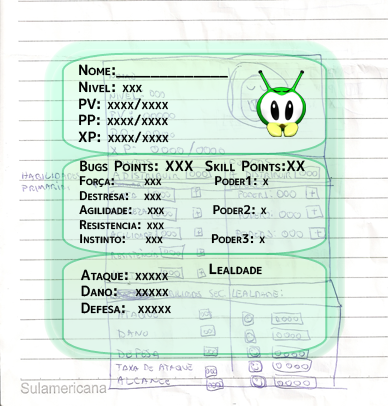
<style>
.page{position:relative;width:388px;height:406px;background:#ffffff}
.page>*{position:absolute;margin:0}
.t1{font:14px "mplus-1p-bold";color:#010101;font-variant:small-caps}
.t2{font:12px "mplus-1p-bold";color:#010101;font-variant:small-caps}
</style>
<div class="page">
<p class="t1" style="left:78px;top:64px;width:150px;height:79px">Nome:_____________<br>Nivel: xxx<br>PV: xxxx/xxxx<br>PP: xxxx/xxxx<br>XP: xxxx/xxxx</p>
<p class="t2" style="left:79px;top:160px;width:226px;height:84px"><span class="t1">Bugs Points: XXX  Skill Points:XX<br></span>Força:      xxx           Poder1: x<br>Destresa:   xxx           <br>Agilidade:   xxx          Poder2: x<br>Resistencia: xxx<br>Instinto:    xxx          Poder3: x</p>
<p class="t1" style="left:81px;top:269px;width:90px;height:45px">Ataque: xxxxx<br>Dano:   xxxxx<br>Defesa:  xxxxx</p>
<p class="t1" style="left:209px;top:263px;width:53px;height:12px">Lealdade</p>
</div>
